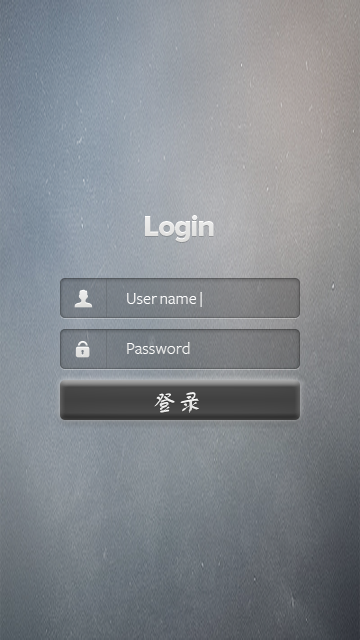
<style>
.page{position:relative;width:360px;height:640px}
.page>*{position:absolute;margin:0}
.t1{font:30px "ProximaNova-Extrabld";letter-spacing:-0.04em;color:#dddddb}
.t2{font:17px/50px "FreightSansBook";color:#ffffff}
.t3{font:25px "FZSTK--GBK1-0";color:#ffffff}
</style>
<div class="page">
<p class="t1" style="left:145px;top:215px;width:69px;height:27px">Login</p>
<p class="t2" style="left:127px;top:292px;width:75px;height:62px">User name |<br>Password</p>
<p class="t3" style="left:154px;top:392px;width:45px;height:21px">登录</p>
</div>
